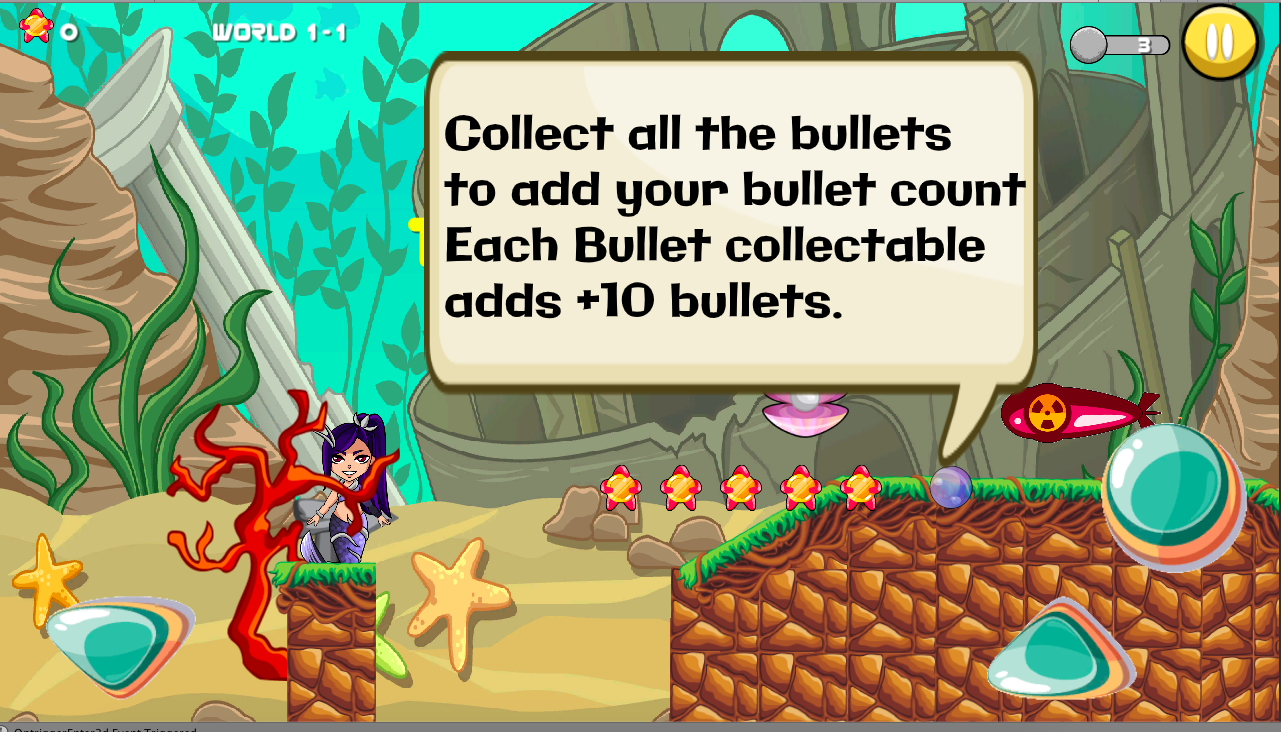
<style>
.page{position:relative;width:1281px;height:732px}
.page>*{position:absolute;margin:0}
.t1{font:46.5px "Galindo-Regular";color:#000000}
</style>
<div class="page">
<p class="t1" style="left:444px;top:114px;width:582px;height:205px">Collect all the bullets<br>to add your bullet count<br>Each Bullet collectable <br>adds +10 bullets.</p>
</div>
